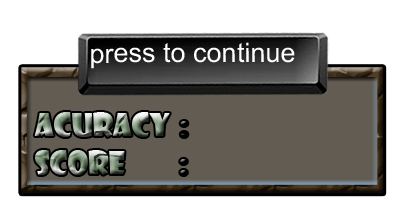
<style>
.page{position:relative;width:400px;height:200px;background:#ffffff}
.page>*{position:absolute;margin:0}
.t1{font:27px "ArialMT";color:#ffffff}
.t2{font:30px "ShowcardGothic-Reg"}
</style>
<div class="page">
<p class="t1" style="left:91px;top:42px;width:204px;height:27px">press to continue</p>
<p class="t2" style="left:34px;top:112px;width:154px;height:25px">acuracy :</p>
<p class="t2" style="left:35px;top:150px;width:152px;height:25px">Score  :</p>
</div>
